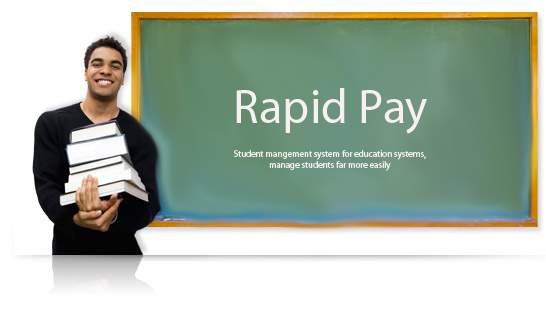
<style>
.page{position:relative;width:546px;height:315px;background:#ffffff}
.page>*{position:absolute;margin:0}
.t1{font:48px "MyriadPro-Regular";color:#f8f0f0}
.t2{font:9px "MyriadPro-Regular";color:#f8f0f0}
</style>
<div class="page">
<p class="t1" style="left:236px;top:88px;width:191px;height:46px">Rapid Pay</p>
<p class="t2" style="left:234px;top:150px;width:192px;height:21px;text-align:center">Student mangement system for education systems, <br>manage students far more easily</p>
</div>
